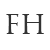
<style>
.page{position:relative;width:50px;height:50px;background:#ffffff}
.page>*{position:absolute;margin:0}
.t1{font:27px "TrajanPro-Regular";color:#333333}
</style>
<div class="page">
<p class="t1" style="left:6px;top:14px;width:38px;height:20px">FH</p>
</div>
